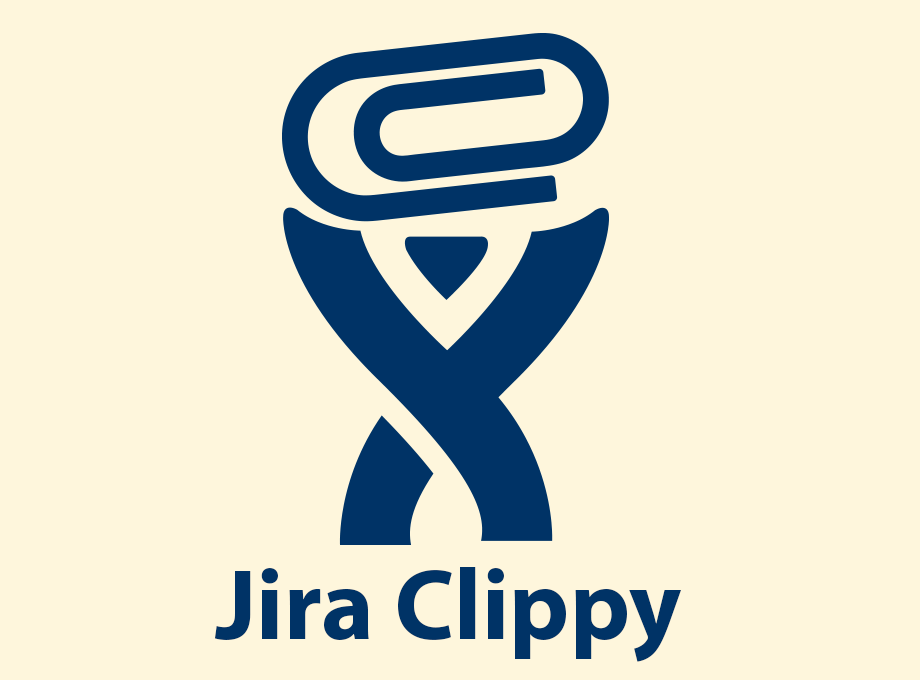
<style>
.page{position:relative;width:920px;height:680px;background:#fef6dc}
.page>*{position:absolute;margin:0}
.t1{font:100.8px "MyriadPro-Bold";color:#003366}
</style>
<div class="page">
<p class="t1" style="left:214px;top:567px;width:467px;height:95px">Jira Clippy</p>
</div>
